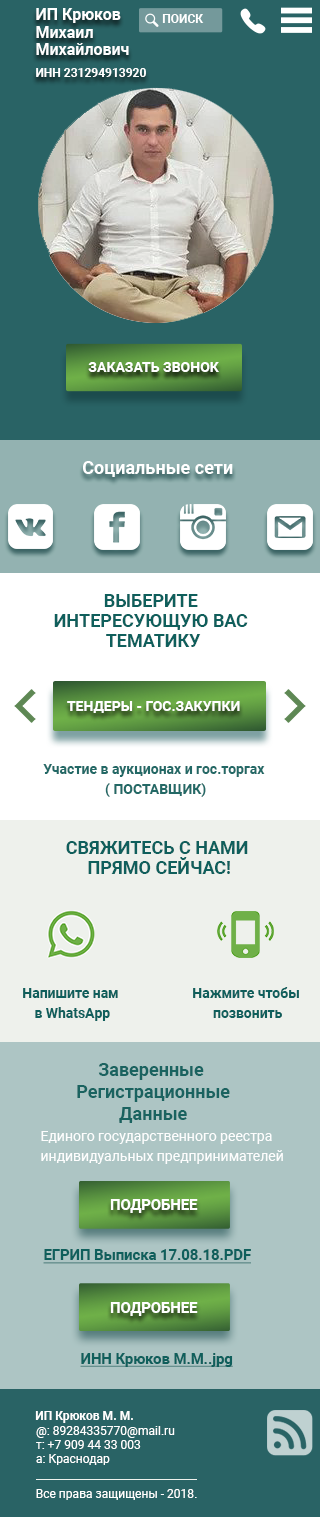
<style>
.page{position:relative;width:320px;height:1517px;background:#296365}
.page>*{position:absolute;margin:0}
.t1{font:16px/8.8px "Roboto-Bold";color:#ffffff}
.t2{font:12px "Roboto-Bold";color:#ffffff;text-transform:uppercase}
.t3{font:12px "Roboto-Bold";color:#ffffff}
.t4{font:14px "Roboto-Bold";color:#ffffff;text-transform:uppercase}
.t5{font:18px "Roboto-Bold";color:#ffffff}
.t6{font:18px/20px "Roboto-Bold";color:#0f5f5c}
.t7{font:14px/20px "Roboto-Bold";color:#236966}
.t8{font:14px/20.1px "Roboto-Bold";color:#0f5f5c}
.t9{font:18px/22px "Roboto-Bold";color:#0f5f5c}
.t10{font:14px/20px "Roboto-Regular";color:#ffffff}
.t11{font:14.8px "Roboto-Bold";color:#ffffff;text-transform:uppercase}
.t12{font:14.8px "Roboto-Bold";color:#0f5f5c;text-decoration:underline}
.t13{font:12px/14.3px "Roboto-Regular";color:#ffffff}
.t14{font:12px "Roboto-Regular";color:#ffffff}
</style>
<div class="page">
<p class="t1" style="left:36px;top:8px;width:93px;height:47px">ИП Крюков<br> <br>Михаил <br><br>Михайлович</p>
<p class="t2" style="left:162px;top:14px;width:42px;height:9px">Поиск</p>
<p class="t3" style="left:36px;top:68px;width:110px;height:9px">ИНН 231294913920</p>
<p class="t4" style="left:88px;top:362px;width:131px;height:10px">заказать звонок</p>
<p class="t5" style="left:83px;top:461px;width:150px;height:16px">Социальные сети</p>
<p class="t6" style="left:54px;top:594px;width:194px;height:53px;text-align:center">ВЫБЕРИТЕ <br>ИНТЕРЕСУЮЩУЮ ВАС <br>ТЕМАТИКУ</p>
<p class="t4" style="left:67px;top:701px;width:173px;height:12px">Тендеры - Гос.закупки</p>
<p class="t7" style="left:43px;top:764px;width:222px;height:33px;text-align:center">Участие в аукционах и гос.торгах<br> ( ПОСТАВЩИК)</p>
<p class="t6" style="left:66px;top:841px;width:182px;height:33px;text-align:center">СВЯЖИТЕСЬ С НАМИ<br> ПРЯМО СЕЙЧАС!</p>
<p class="t8" style="left:23px;top:988px;width:95px;height:33px;text-align:center">Напишите нам<br> в WhatsApp</p>
<p class="t8" style="left:193px;top:987px;width:106px;height:31px;text-align:center">Нажмите чтобы<br> позвонить</p>
<p class="t9" style="left:77px;top:1063px;width:153px;height:60px;text-align:center;opacity:0.97">Заверенные<br> Регистрационные<br> Данные</p>
<p class="t10" style="left:41px;top:1131px;width:242px;height:33px;opacity:0.97">Единого государственного реестра <br>индивидуальных предпринимателей</p>
<p class="t11" style="left:110px;top:1199px;width:88px;height:14px">Подробнее</p>
<p class="t12" style="left:43px;top:1249px;width:208px;height:15px">ЕГРИП Выписка 17.08.18.PDF</p>
<p class="t11" style="left:110px;top:1302px;width:88px;height:14px">Подробнее</p>
<p class="t12" style="left:80px;top:1353px;width:153px;height:14px">ИНН Крюков М.М..jpg</p>
<p class="t3" style="left:35px;top:1411px;width:98px;height:12px">ИП Крюков М. М.</p>
<p class="t13" style="left:36px;top:1426px;width:139px;height:39px">@: 89284335770@mail.ru<br>т: +7 909 44 33 003<br>а: Краснодар</p>
<p class="t14" style="left:36px;top:1489px;width:161px;height:11px">Все права защищены - 2018.</p>
</div>
